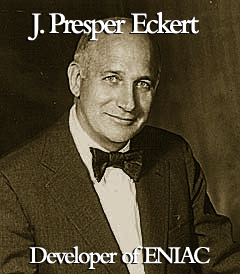
<style>
.page{position:relative;width:240px;height:274px}
.page>*{position:absolute;margin:0}
.t1{font:31.2px "BemboMT-SemiBold";letter-spacing:-0.08em;color:#ffffff;scale:0.95 1}
.t2{font:25px "BemboMT-SemiBold";letter-spacing:-0.08em;color:#ffffff;scale:0.95 1}
</style>
<div class="page">
<p class="t1" style="left:27px;top:12px;width:172px;height:29px">J. Presper Eckert</p>
<p class="t2" style="left:29px;top:246px;width:181px;height:23px">Developer of ENIAC</p>
</div>
